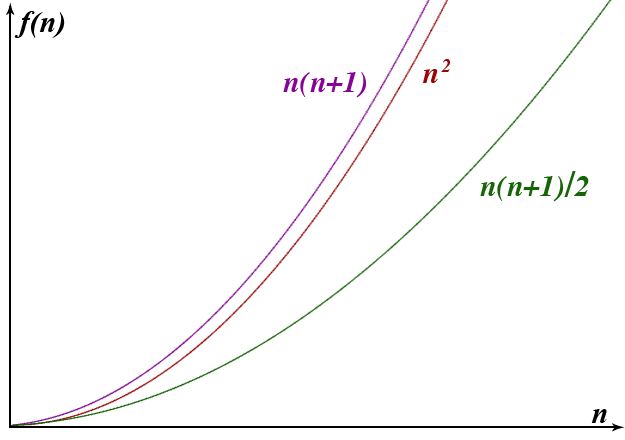
<style>
.page{position:relative;width:625px;height:440px;background:#ffffff}
.page>*{position:absolute;margin:0}
.t1{font:30px "TimesNewRomanPS-BoldItalicMT";color:#000000}
.t2{font:18px "Times-BoldItalic";color:#9b0404}
.t3{font:30px "Times-BoldItalic";color:#850497}
.t4{font:30px "Times-BoldItalic";color:#9b0404}
.t5{font:30px "Times-BoldItalic";color:#156506}
.t6{font:36px "Times-BoldItalic";color:#156506}
</style>
<div class="page">
<p class="t1" style="left:14px;top:11px;width:51px;height:27px">f(n)</p>
<p class="t2" style="left:441px;top:59px;width:10px;height:13px">2</p>
<p class="t3" style="left:283px;top:72px;width:84px;height:26px">n(n+1)</p>
<p class="t4" style="left:423px;top:69px;width:15px;height:14px">n</p>
<p class="t5" style="left:480px;top:171px;width:109px;height:31px">n(n+1)<span class="t6">/</span>2</p>
<p class="t1" style="left:591px;top:409px;width:16px;height:14px">n</p>
</div>
